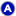
<style>
.page{position:relative;width:16px;height:16px;background:#000cae}
.page>*{position:absolute;margin:0}
.t1{font:10px "Arial-BoldMT";letter-spacing:0.075em;color:#ffffff;text-transform:uppercase;font-weight:bold;scale:1.1 1}
</style>
<div class="page">
<p class="t1" style="left:3px;top:4px;width:9px;height:8px">A</p>
</div>
